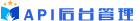
<style>
.page{position:relative;width:140px;height:21px;background:#ffffff}
.page>*{position:absolute;margin:0}
.t1{font:16.5px "FZCTHJW--GB1-0";letter-spacing:0.2em;color:#2964e2;text-transform:uppercase}
.t2{font:16.5px "FranklinGothic-Demi";letter-spacing:0.2em;color:#2964e2;text-transform:uppercase}
</style>
<div class="page">
<p class="t1" style="left:23px;top:8px;width:110px;height:13px"><span class="t2">API</span>后台管理</p>
</div>
